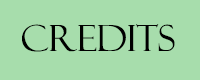
<style>
.page{position:relative;width:200px;height:80px;background:#a7ddac}
.page>*{position:absolute;margin:0}
.t1{font:36px "FelixTitlingMT";color:#000000}
</style>
<div class="page">
<p class="t1" style="left:22px;top:24px;width:153px;height:28px">credits</p>
</div>
